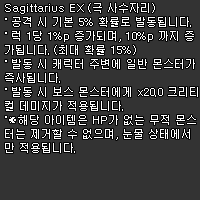
<style>
.page{position:relative;width:200px;height:200px;background:#333333}
.page>*{position:absolute;margin:0}
.t1{font:11px/14px "Dotum";color:#ffffff}
</style>
<div class="page">
<p class="t1" style="left:5px;top:3px;width:193px;height:150px">Sagittarius EX (극 사수자리)<br>˚ 공격 시 기본 5% 확률로 발동됩니다.<br>˚ 럭 1당 1%p 증가되며, 10%p 까지 증<br>가됩니다. (최대 확률 15%)<br>˚ 발동 시 캐릭터 주변에 일반 몬스터가<br>즉사됩니다.<br>˚ 발동 시 보스 몬스터에게 x20.0 크리티<br>컬 데미지가 적용됩니다.<br>˚※해당 아이템은 HP가 없는 무적 몬스<br>터는 제거할 수 없으며, 눈물 상태에서<br>만 적용됩니다.</p>
</div>
